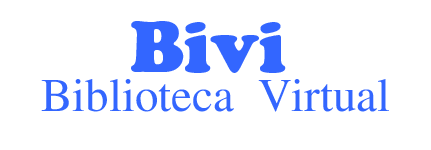
<style>
.page{position:relative;width:431px;height:150px;background:#ffffff}
.page>*{position:absolute;margin:0}
.t1{font:72px "CooperBlackStd";color:#3366ff}
.t2{font:48px "aakar-medium";color:#3366ff}
</style>
<div class="page">
<p class="t1" style="left:131px;top:21px;width:155px;height:52px">Bivi</p>
<p class="t2" style="left:41px;top:79px;width:348px;height:33px">Biblioteca Virtual</p>
</div>
